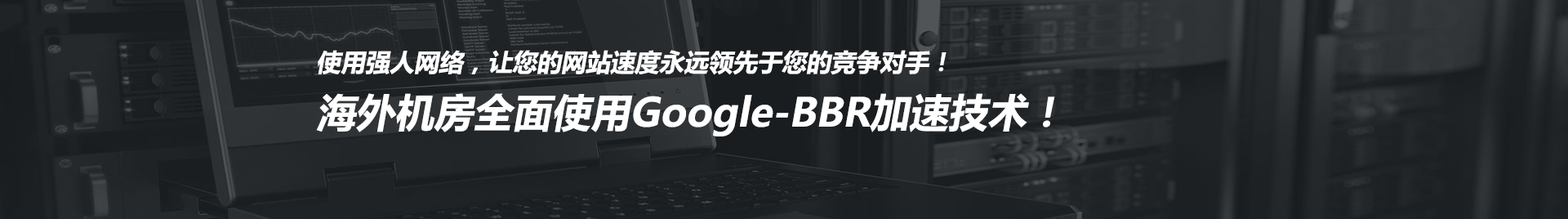
<style>
.page{position:relative;width:1568px;height:219px}
.page>*{position:absolute;margin:0}
.t1{font:24.5px "MicrosoftYaHei-Bold";color:#ffffff;font-style:italic}
.t2{font:39.2px "MicrosoftYaHei-Bold";color:#ffffff;font-style:italic}
</style>
<div class="page">
<p class="t1" style="left:316px;top:50px;width:739px;height:86px">使用强人网络，让您的网站速度永远领先于您的竞争对手！<br><span class="t2">海外机房全面使用Google-BBR加速技术！</span></p>
</div>
